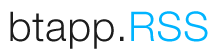
<style>
.page{position:relative;width:224px;height:54px;background:#ffffff}
.page>*{position:absolute;margin:0}
.t1{font:41px "HelveticaNeueLTPro-Lt";letter-spacing:0.02em;color:#1c1c1c}
.t2{font:41px "HelveticaNeueLTPro-Lt";letter-spacing:0.02em;color:#00b4ff}
</style>
<div class="page">
<p class="t1" style="left:10px;top:11px;width:198px;height:38px">btapp.<span class="t2">RSS</span></p>
</div>
